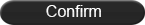
<style>
.page{position:relative;width:145px;height:25px;background:#282828}
.page>*{position:absolute;margin:0}
.t1{font:16.1px "ArialMT";color:#ffffff}
</style>
<div class="page">
<p class="t1" style="left:46px;top:5px;width:55px;height:12px">Confirm</p>
</div>
